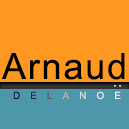
<style>
.page{position:relative;width:129px;height:129px;background:#ff9821}
.page>*{position:absolute;margin:0}
.t1{font:36px "ArialMT";letter-spacing:0.05em;color:#000000}
.t2{font:10px "ArialMT";letter-spacing:1.02em;color:#0d0d0d}
.t3{font:10px "ArialMT";letter-spacing:1.02em;color:#262626}
.t4{font:10px "ArialMT";letter-spacing:1.02em;color:#585858}
.t5{font:10px "ArialMT";letter-spacing:1.02em;color:#b1b1b1}
.t6{font:10px "ArialMT";letter-spacing:1.02em;color:#d9d9d9}
.t7{font:10px "ArialMT";letter-spacing:1.02em;color:#e5e5e5}
.t8{font:10px "ArialMT";letter-spacing:1.02em;color:#f2f2f2}
</style>
<div class="page">
<p class="t1" style="left:1px;top:53px;width:124px;height:27px">Arnaud</p>
<p class="t2" style="left:13px;top:91px;width:108px;height:9px">D<span class="t3">E</span><span class="t4">L</span><span class="t5">A</span><span class="t6">N</span><span class="t7">O</span><span class="t8">E</span></p>
</div>
